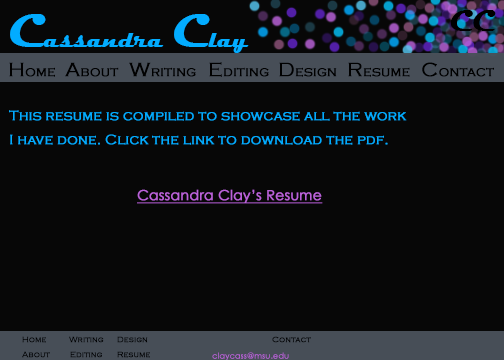
<style>
.page{position:relative;width:504px;height:360px;background:#070707}
.page>*{position:absolute;margin:0}
.t1{font:24px "Magneto-Bold";color:#02acff}
.t2{font:48px "Magneto-Bold";color:#02acff}
.t3{font:30px "Magneto-Bold";color:#000000}
.t4{font:14px "CopperplateGothic-Light";color:#000000;font-weight:bold}
.t5{font:20px "CopperplateGothic-Light";color:#000000;font-weight:bold}
.t6{font:14px/24px "CopperplateGothic-Light";color:#02acff;font-weight:bold}
.t7{font:14px "CenturyGothic";color:#ba62d9;font-weight:bold;text-decoration:underline}
.t8{font:8px "CopperplateGothic-Light";color:#000000;font-weight:bold}
.t9{font:8px "CenturyGothic";color:#ba62d9;font-weight:bold}
</style>
<div class="page">
<p class="t1" style="left:10px;top:14px;width:239px;height:39px"><span class="t2">C</span>assandra <span class="t2">C</span>lay</p>
<p class="t3" style="left:450px;top:10px;width:46px;height:21px">CC</p>
<p class="t4" style="left:9px;top:62px;width:46px;height:15px"><span class="t5">H</span>ome</p>
<p class="t4" style="left:65px;top:62px;width:54px;height:15px"><span class="t5">A</span>bout</p>
<p class="t4" style="left:129px;top:62px;width:67px;height:15px"><span class="t5">W</span>riting</p>
<p class="t4" style="left:209px;top:62px;width:60px;height:15px"><span class="t5">E</span>diting</p>
<p class="t4" style="left:279px;top:62px;width:58px;height:15px"><span class="t5">D</span>esign</p>
<p class="t4" style="left:348px;top:62px;width:62px;height:15px"><span class="t5">R</span>esume</p>
<p class="t4" style="left:422px;top:62px;width:72px;height:15px"><span class="t5">C</span>ontact</p>
<p class="t6" style="left:9px;top:110px;width:398px;height:35px">This resume is compiled to showcase all the work<br>I have done. Click the link to download the pdf.</p>
<p class="t7" style="left:137px;top:189px;width:186px;height:15px">Cassandra Clay’s Resume</p>
<p class="t8" style="left:22px;top:336px;width:24px;height:7px">Home</p>
<p class="t8" style="left:69px;top:336px;width:35px;height:7px">Writing</p>
<p class="t8" style="left:117px;top:336px;width:31px;height:7px">Design</p>
<p class="t8" style="left:272px;top:336px;width:39px;height:7px">Contact</p>
<p class="t8" style="left:22px;top:351px;width:28px;height:7px">About</p>
<p class="t8" style="left:70px;top:351px;width:32px;height:7px">Editing</p>
<p class="t8" style="left:117px;top:351px;width:33px;height:7px">Resume</p>
<p class="t9" style="left:212px;top:352px;width:77px;height:9px">claycass@msu.edu</p>
</div>
